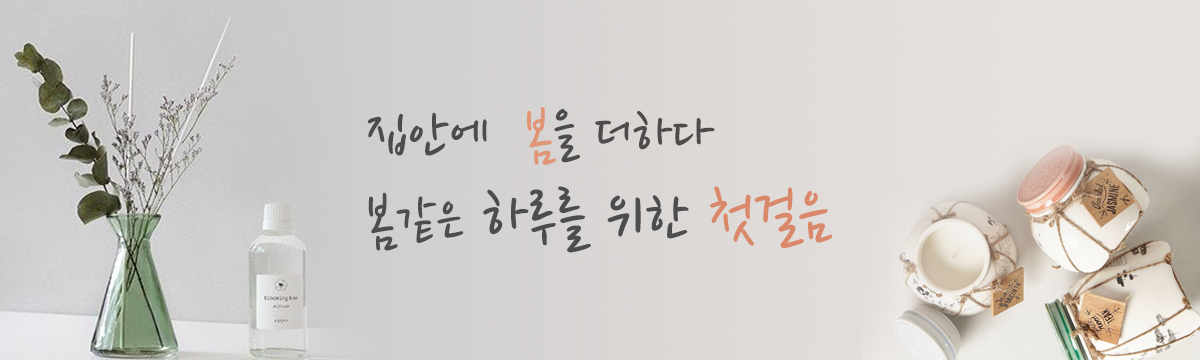
<style>
.page{position:relative;width:1200px;height:360px}
.page>*{position:absolute;margin:0}
.t1{font:71.4px "NanumPen";color:#4d4d4d}
.t2{font:61.8px "NanumPen";color:#4e4b4b}
.t3{font:61.8px "NanumPen";color:#e19576}
.t4{font:61.8px "NanumPen";color:#4d4d4d}
.t5{font:71.4px "NanumPen";color:#da886a}
</style>
<div class="page">
<p class="t1" style="left:367px;top:107px;width:466px;height:146px"><span class="t2">집안에  </span><span class="t3">봄</span><span class="t2">을 더하다<br></span><span class="t4">봄같은</span> 하루를 위한 <span class="t5">첫걸음</span></p>
</div>
